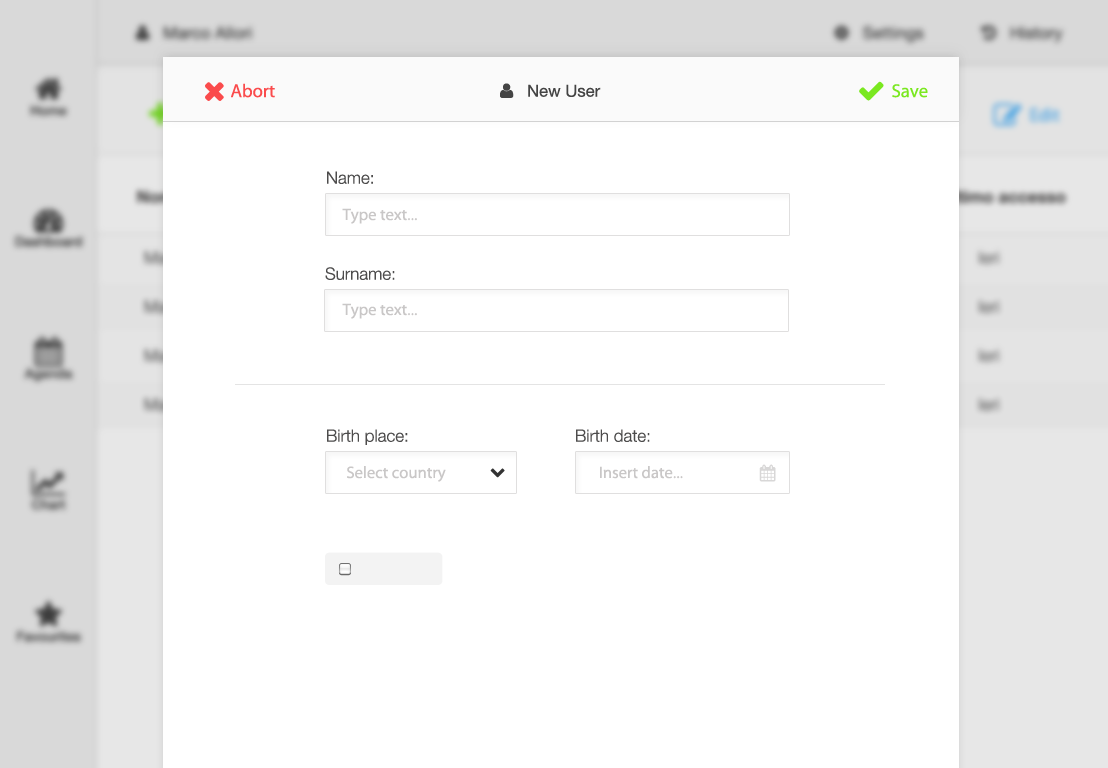
<style>
.page{position:relative;width:1108px;height:768px;background:#ffffff}
.page>*{position:absolute;margin:0}
.t1{font:18.7px "MyriadPro-Regular";color:#fa4b4c}
.t2{font:18.7px "MyriadPro-Regular";color:#7ae820}
.t3{font:17px "HelveticaNeue-Light";color:#4d4c4c}
.t4{font:16.7px "MyriadPro-Regular";color:#c9c7c7}
</style>
<div class="page">
<p class="t1" style="left:231px;top:83px;width:44px;height:15px">Abort</p>
<p class="t2" style="left:892px;top:84px;width:36px;height:14px">Save</p>
<p class="t3" style="left:327px;top:171px;width:46px;height:13px">Name:</p>
<p class="t4" style="left:342px;top:208px;width:75px;height:16px">Type text...</p>
<p class="t3" style="left:325px;top:267px;width:70px;height:13px">Surname:</p>
<p class="t4" style="left:342px;top:303px;width:75px;height:16px">Type text...</p>
<p class="t3" style="left:327px;top:429px;width:81px;height:16px">Birth place:</p>
<p class="t3" style="left:576px;top:429px;width:74px;height:13px">Birth date:</p>
<p class="t4" style="left:347px;top:466px;width:99px;height:16px">Select country</p>
<p class="t4" style="left:600px;top:466px;width:83px;height:13px">Insert date...</p>
</div>
